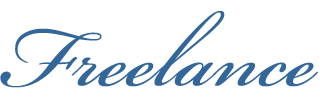
<style>
.page{position:relative;width:320px;height:110px;background:#ffffff}
.page>*{position:absolute;margin:0}
.t1{font:130px "BeautifulES";color:#336699}
</style>
<div class="page">
<p class="t1" style="left:0px;top:11px;width:318px;height:77px">Freelance</p>
</div>
